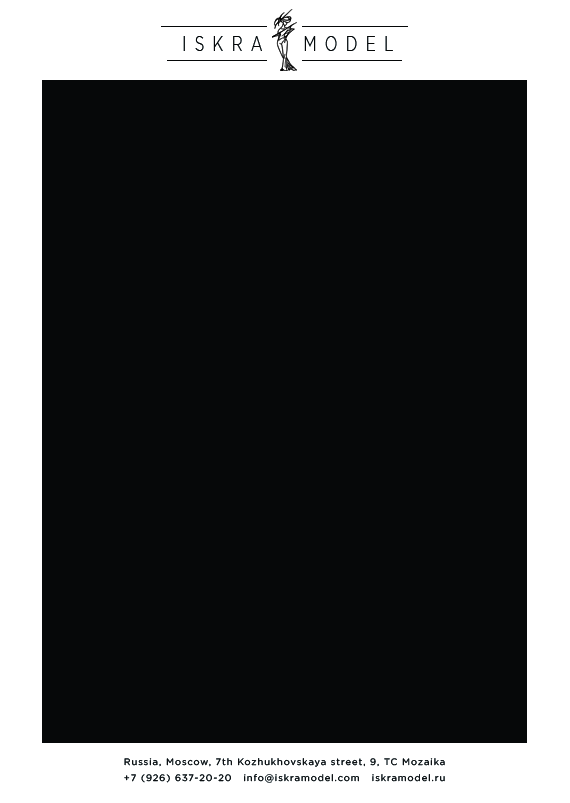
<style>
.page{position:relative;width:570px;height:803px;background:#060809}
.page>*{position:absolute;margin:0}
.t1{font:21.5px "GothamPro-Light";letter-spacing:0.56em;color:#050708;scale:0.7 1}
.t2{font:21.5px "GothamPro-Light";letter-spacing:0.56em;color:#07090a;scale:0.7 1}
.t3{font:9.3px/16px "GothamPro";letter-spacing:0.1em;color:#000000}
</style>
<div class="page">
<p class="t1" style="left:183px;top:36px;width:79px;height:15px">ISKRA</p>
<p class="t2" style="left:304px;top:36px;width:89px;height:15px">MODEL</p>
<p class="t3" style="left:124px;top:758px;width:321px;height:25px;text-align:center">Russia, Moscow, 7th Kozhukhovskaya street, 9, TC Mozaika<br>+7 (926) 637-20-20   info@iskramodel.com   iskramodel.ru</p>
</div>
